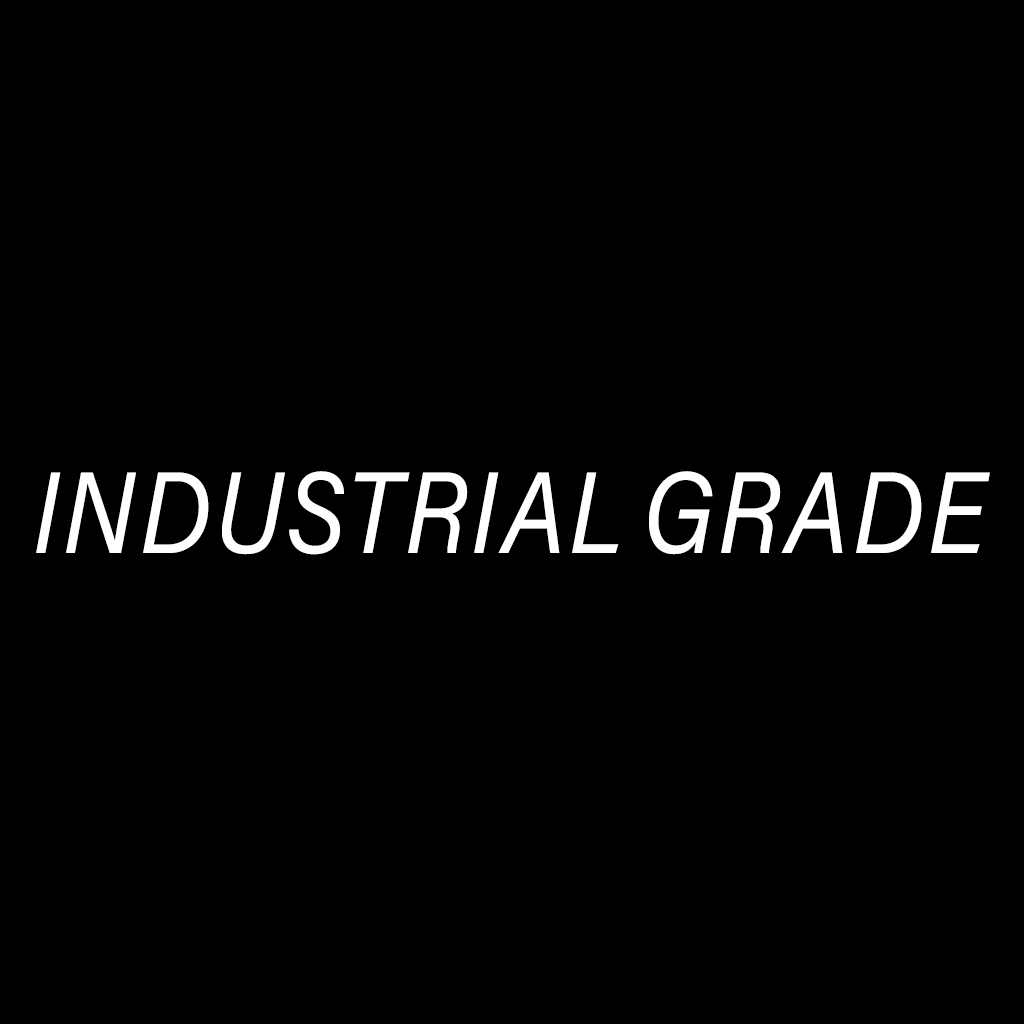
<style>
.page{position:relative;width:1024px;height:1024px;background:#000000}
.page>*{position:absolute;margin:0}
.t1{font:115.5px "AcuminConcept-Italic";letter-spacing:0.03em;color:#ffffff;text-transform:uppercase;scale:0.88 1}
</style>
<div class="page">
<p class="t1" style="left:36px;top:471px;width:954px;height:84px">Industrial grade</p>
</div>
